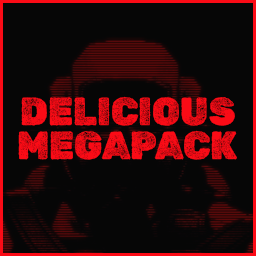
<style>
.page{position:relative;width:256px;height:256px;background:#060606}
.page>*{position:absolute;margin:0}
.t1{font:38.9px "RubikDirt-Regular";color:#fb0b16;scale:0.97 1}
</style>
<div class="page">
<p class="t1" style="left:21px;top:96px;width:214px;height:30px">DELICIOUS</p>
<p class="t1" style="left:18px;top:130px;width:219px;height:30px">MEGAPACK</p>
</div>
